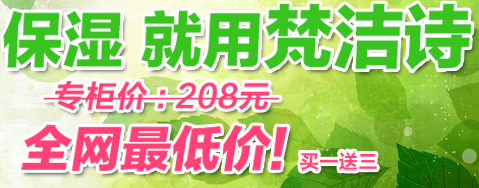
<style>
.page{position:relative;width:479px;height:188px}
.page>*{position:absolute;margin:0}
.t1{font:61.1px "FZLTTHK--GBK1-0";color:#39c31e}
.t2{font:69.6px "FZLTTHK--GBK1-0";color:#39c31e}
.t3{font:32px "FZLTCHJW--GB1-0";color:#ff4177}
.t4{font:50.4px "FZLTTHK--GBK1-0";color:#ff4177}
.t5{font:19.5px "FZLTCHJW--GB1-0";color:#ff4177}
</style>
<div class="page">
<p class="t1" style="left:3px;top:3px;width:469px;height:68px">保湿 就用<span class="t2">梵洁诗</span></p>
<p class="t3" style="left:42px;top:81px;width:238px;height:30px">专柜价 : 208元</p>
<p class="t4" style="left:21px;top:124px;width:267px;height:48px">全网最低价!</p>
<p class="t5" style="left:300px;top:151px;width:77px;height:20px">买一送三</p>
</div>
